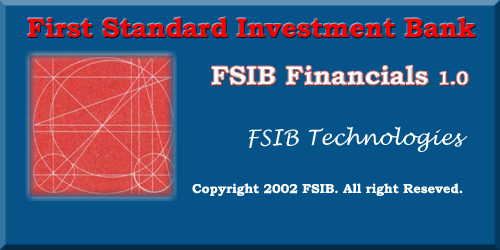
<style>
.page{position:relative;width:500px;height:250px;background:#065389}
.page>*{position:absolute;margin:0}
.t1{font:26.7px "BookmanOldStyle-Bold";color:#ff0000}
.t2{font:26.7px "BookmanOldStyle-Bold";color:#ffffff}
.t3{font:18.7px "BookmanOldStyle-Bold";color:#ffffff}
.t4{font:21.3px "LucidaHandwriting-Italic";color:#fcfdfd}
.t5{font:13px "BookmanOldStyle-Bold";color:#fcfdfd}
</style>
<div class="page">
<p class="t1" style="left:28px;top:17px;width:448px;height:21px">First Standard Investment Bank</p>
<p class="t2" style="left:212px;top:65px;width:257px;height:21px">FSIB Financials <span class="t3">1.0</span></p>
<p class="t4" style="left:248px;top:126px;width:220px;height:26px">FSIB Technologies</p>
<p class="t5" style="left:192px;top:183px;width:271px;height:13px">Copyright 2002 FSIB. All right Reseved.</p>
</div>
